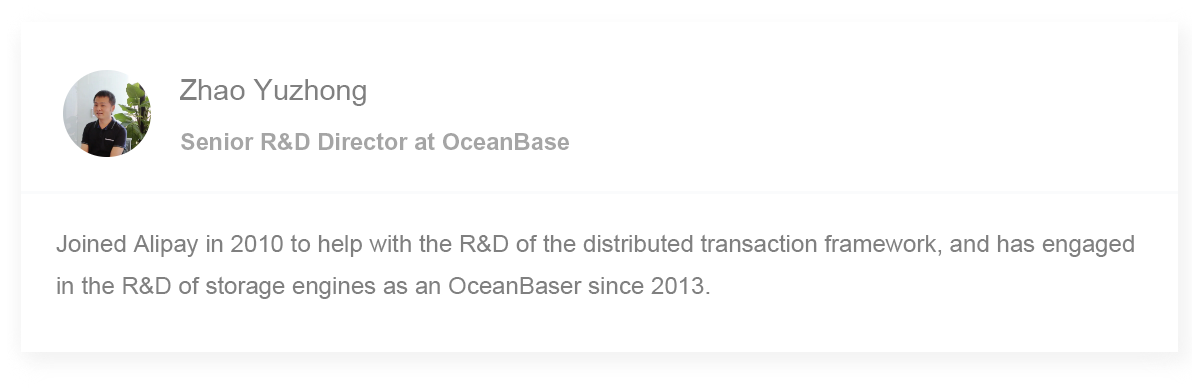
<style>
.page{position:relative;width:1199px;height:392px;background:#ffffff}
.page>*{position:absolute;margin:0}
.t1{font:29px "ArialMT";color:#808080}
.t2{font:23.5px "Arial-BoldMT";color:#a5a5a5}
.t3{font:24px "ArialMT";color:#808080}
</style>
<div class="page">
<p class="t1" style="left:180px;top:79px;width:186px;height:27px">Zhao Yuzhong</p>
<p class="t2" style="left:181px;top:132px;width:388px;height:18px">Senior R&amp;D Director at OceanBase</p>
<p class="t3" style="left:56px;top:234px;width:1078px;height:65px">Joined Alipay in 2010 to help with the R&amp;D of the distributed transaction framework, and has engaged in the R&amp;D of storage engines as an OceanBaser since 2013.</p>
</div>
